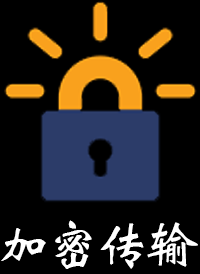
<style>
.page{position:relative;width:200px;height:274px;background:#000000}
.page>*{position:absolute;margin:0}
.t1{font:55px "STXinwei";letter-spacing:-0.11em;color:#ffffff}
</style>
<div class="page">
<p class="t1" style="left:1px;top:220px;width:197px;height:49px">加密传输</p>
</div>
